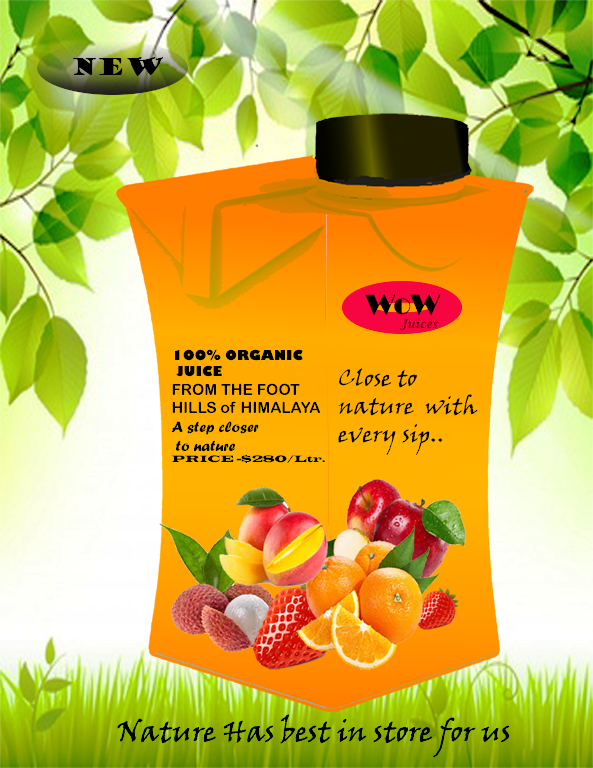
<style>
.page{position:relative;width:593px;height:768px}
.page>*{position:absolute;margin:0}
.t1{font:23.3px "GoudyStout";color:#050505}
.t2{font:11.6px "LucidaCalligraphy-Italic";color:#000000}
.t3{font:17.5px "TrajanColor-Concept";color:#000000}
.t4{font:29.1px "Broadway";color:#000000}
.t5{font:15.5px "ArialRoundedMTBold";color:#000000}
.t6{font:13.6px "GillSans-UltraBold";color:#000000}
.t7{font:15.5px "ForteMT";color:#000000}
.t8{font:9.7px "LatinWide";color:#000000}
.t9{font:23.3px "VinerHandITC";color:#000000}
.t10{font:29.1px "VinerHandITC";color:#000000}
</style>
<div class="page">
<p class="t1" style="left:73px;top:57px;width:91px;height:19px">NEW</p>
<p class="t2" style="left:365px;top:294px;width:76px;height:36px"><span class="t3"> <br></span><span class="t4">WoW<br>           </span>Juices</p>
<p class="t5" style="left:171px;top:349px;width:154px;height:114px"><span class="t6">100% ORGANIC<br> JUICE<br></span>FROM THE FOOT <br>HILLS of HIMALAYA<br><span class="t7">A step closer<br> to nature<br></span><span class="t8">PRICE -$280/Ltr.</span></p>
<p class="t9" style="left:338px;top:368px;width:140px;height:87px">Close to <br>nature  with<br>every sip..</p>
<p class="t10" style="left:117px;top:714px;width:393px;height:44px">Nature Has best in store for us</p>
</div>
